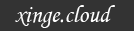
<style>
.page{position:relative;width:134px;height:31px;background:#333333}
.page>*{position:absolute;margin:0}
.t1{font:24px "STLiti";color:#fefefe}
</style>
<div class="page">
<p class="t1" style="left:15px;top:5px;width:100px;height:23px">xinge.cloud</p>
</div>
